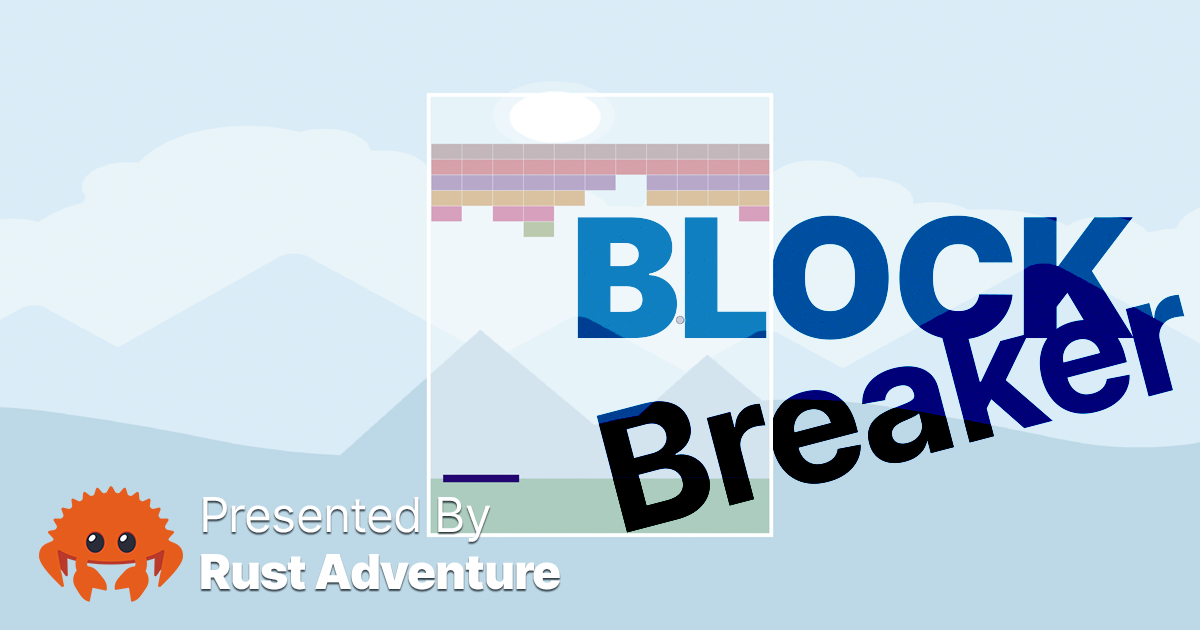
<style>
.page{position:relative;width:1200px;height:630px;background:#daecf7}
.page>*{position:absolute;margin:0}
.t1{font:165.6px "Inter-Black";letter-spacing:-0.02em}
.t2{font:165.6px "Inter-Bold";letter-spacing:-0.02em}
.t3{font:48px "Inter-Black";letter-spacing:-0.02em;color:#ffffff}
.t4{font:48px "Inter-Regular";letter-spacing:-0.02em;color:#ffffff}
</style>
<div class="page">
<p class="t1" style="left:577px;top:215px;width:557px;height:125px">BLOCK</p>
<p class="t1" style="left:577px;top:215px;width:557px;height:125px">BLOCK</p>
<p class="t1" style="left:577px;top:215px;width:557px;height:125px">BLOCK</p>
<p class="t1" style="left:577px;top:215px;width:557px;height:125px">BLOCK</p>
<p class="t2" style="left:596px;top:294px;width:589px;height:239px;rotate:-15deg">Breaker</p>
<p class="t2" style="left:596px;top:294px;width:589px;height:239px;rotate:-15deg">Breaker</p>
<p class="t2" style="left:596px;top:294px;width:589px;height:239px;rotate:-15deg">Breaker</p>
<p class="t2" style="left:596px;top:294px;width:589px;height:239px;rotate:-15deg">Breaker</p>
<p class="t3" style="left:201px;top:497px;width:359px;height:93px"><span class="t4">Presented By<br></span>Rust Adventure</p>
</div>
